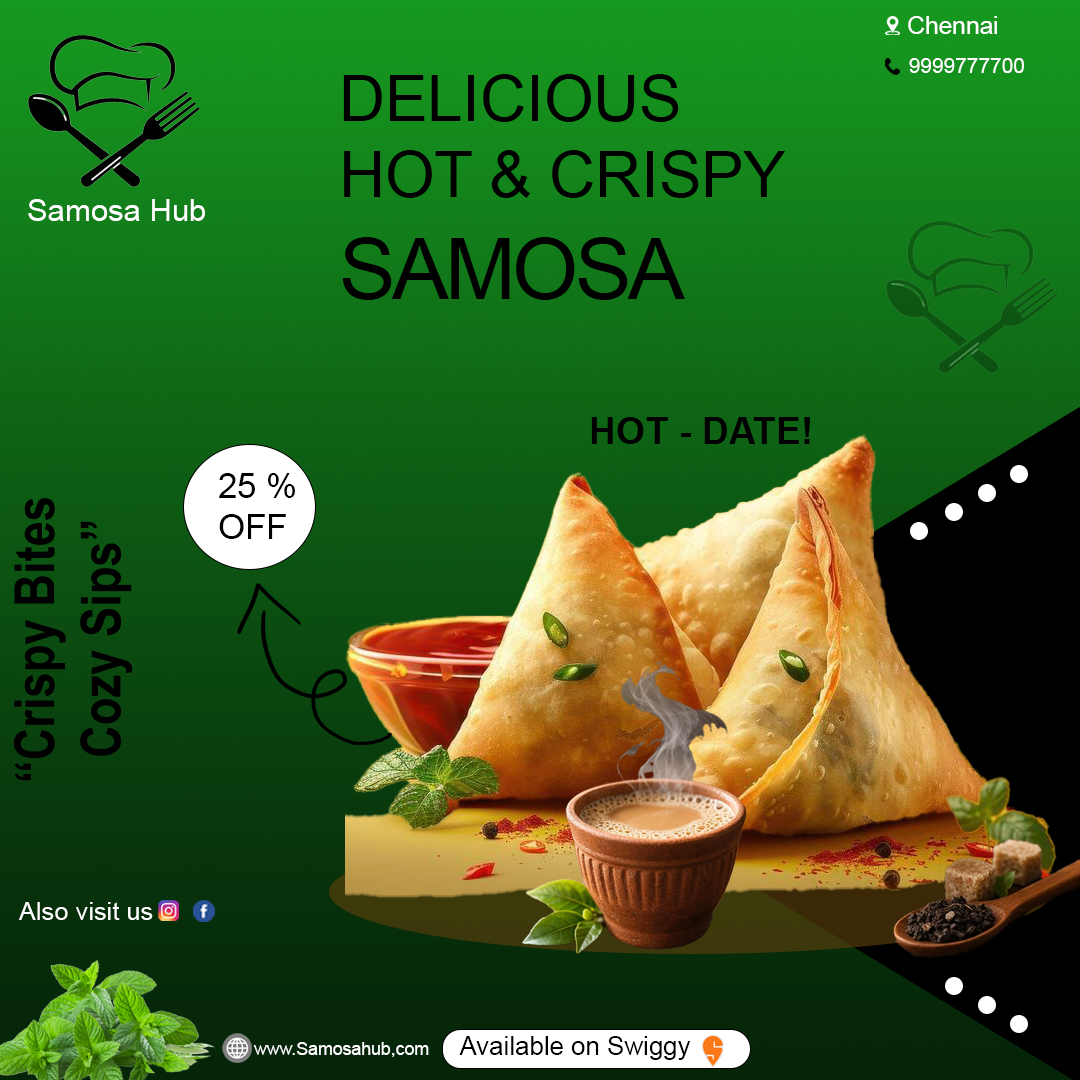
<style>
.page{position:relative;width:1080px;height:1080px}
.page>*{position:absolute;margin:0}
.t1{font:24.6px "ArialMT";color:#ffffff}
.t2{font:20.9px "ArialMT";color:#ffffff}
.t3{font:63.5px "ArialMT";color:#000000}
.t4{font:84.7px "ArialMT";letter-spacing:-0.04em;color:#000000}
.t5{font:31px "ArialMT";color:#ffffff}
.t6{font:37.4px "Arial-BoldMT";color:#000000}
.t7{font:34.6px "ArialMT";color:#000000}
.t8{font:25.4px "ArialMT";color:#ffffff}
.t9{font:25.9px "ArialMT";color:#000000}
.t10{font:17.7px "ArialMT";color:#ffffff}
</style>
<div class="page">
<p class="t1" style="left:908px;top:16px;width:89px;height:18px">Chennai</p>
<p class="t2" style="left:909px;top:58px;width:115px;height:15px">9999777700</p>
<p class="t3" style="left:342px;top:74px;width:443px;height:226px">DELICIOUS<br>HOT &amp; CRISPY<br><span class="t4">SAMOSA</span></p>
<p class="t5" style="left:28px;top:199px;width:177px;height:22px">Samosa Hub</p>
<p class="t6" style="left:591px;top:417px;width:219px;height:27px">HOT - DATE!</p>
<p class="t7" style="left:219px;top:473px;width:76px;height:66px">25 %<br>OFF</p>
<p class="t8" style="left:19px;top:902px;width:134px;height:18px">Also visit us</p>
<p class="t9" style="left:459px;top:1036px;width:232px;height:24px">Available on Swiggy</p>
<p class="t10" style="left:253px;top:1042px;width:176px;height:15px">www.Samosahub,com</p>
</div>
